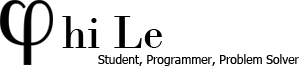
<style>
.page{position:relative;width:308px;height:72px;background:#ffffff}
.page>*{position:absolute;margin:0}
.t1{font:48px "BodoniMT";color:#000000}
.t2{font:12px "Tahoma";color:#000000}
</style>
<div class="page">
<p class="t1" style="left:62px;top:16px;width:100px;height:32px">hi Le</p>
<p class="t2" style="left:98px;top:54px;width:201px;height:12px">Student, Programmer, Problem Solver</p>
</div>
